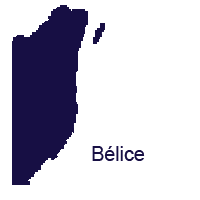
<style>
.page{position:relative;width:200px;height:200px;background:#ffffff}
.page>*{position:absolute;margin:0}
.t1{font:20.8px "ArialMT";color:#170f44;scale:0.94 1}
</style>
<div class="page">
<p class="t1" style="left:92px;top:146px;width:53px;height:15px">Bélice</p>
</div>
